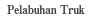
<style>
.page{position:relative;width:91px;height:19px;background:#ffffff}
.page>*{position:absolute;margin:0}
.t1{font:12px "RyuminPro-ExBold";letter-spacing:-0.04em;color:#4c4843;scale:0.9 1}
</style>
<div class="page">
<p class="t1" style="left:7px;top:5px;width:78px;height:9px">Pelabuhan Truk</p>
</div>
